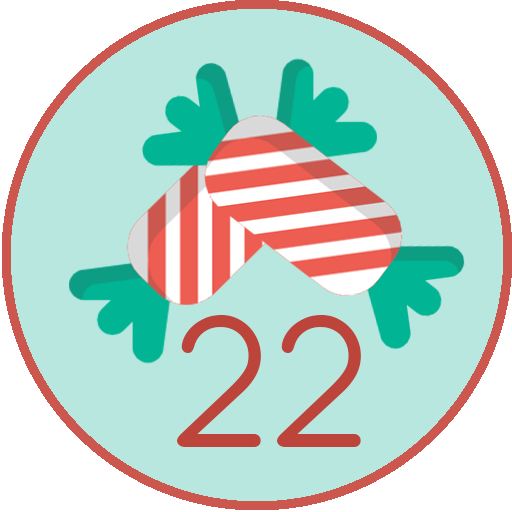
<style>
.page{position:relative;width:512px;height:512px;background:#b8e7df}
.page>*{position:absolute;margin:0}
.t1{font:206.2px "Antipasto";color:#bc443a}
</style>
<div class="page">
<p class="t1" style="left:177px;top:315px;width:184px;height:132px">22</p>
</div>
